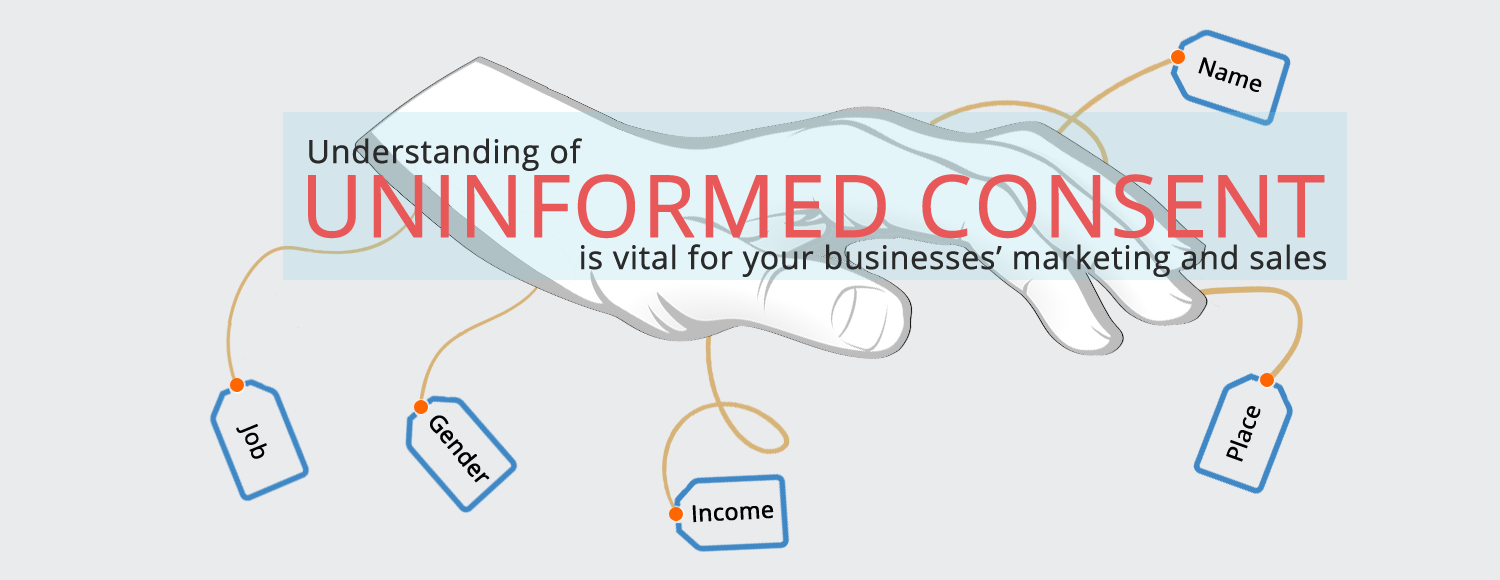
<style>
.page{position:relative;width:1500px;height:580px;background:#eaebed}
.page>*{position:absolute;margin:0}
.t1{font:23px "OpenSans-Regular";color:#010101;font-weight:bold}
.t2{font:32px "OpenSans-Regular";color:#2a2a2a;font-weight:bold}
.t3{font:86px "OpenSans-Regular";color:#e85858;font-weight:bold}
</style>
<div class="page">
<p class="t1" style="left:1198px;top:57px;width:64px;height:35px;rotate:18deg">Name</p>
<p class="t2" style="left:309px;top:138px;width:273px;height:33px">Understanding of</p>
<p class="t3" style="left:308px;top:174px;width:1017px;height:65px">UNINFORMED CONSENT</p>
<p class="t2" style="left:581px;top:244px;width:745px;height:33px">is vital for your businesses’ marketing and sales</p>
<p class="t1" style="left:1226px;top:406px;width:35px;height:56px;rotate:-70deg">Place</p>
<p class="t1" style="left:236px;top:424px;width:31px;height:35px;rotate:68deg">Job</p>
<p class="t1" style="left:430px;top:415px;width:60px;height:68px;rotate:51deg">Gender</p>
<p class="t1" style="left:692px;top:505px;width:82px;height:18px;rotate:-3deg">Income</p>
</div>
